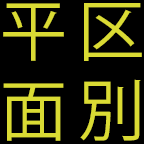
<style>
.page{position:relative;width:144px;height:144px;background:#000000}
.page>*{position:absolute;margin:0}
.t1{font:66.7px "KozGoPr6N-Regular";color:#dadb34}
</style>
<div class="page">
<p class="t1" style="left:3px;top:3px;width:61px;height:138px">平<br>面</p>
<p class="t1" style="left:80px;top:3px;width:62px;height:138px">區<br>別</p>
</div>
